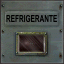
<style>
.page{position:relative;width:64px;height:64px}
.page>*{position:absolute;margin:0}
.t1{font:9.8px "Arial-BoldMT";color:#000000;text-transform:uppercase;scale:0.67 1}
</style>
<div class="page">
<p class="t1" style="left:6px;top:14px;width:51px;height:9px">REFRIGERANTE</p>
</div>
